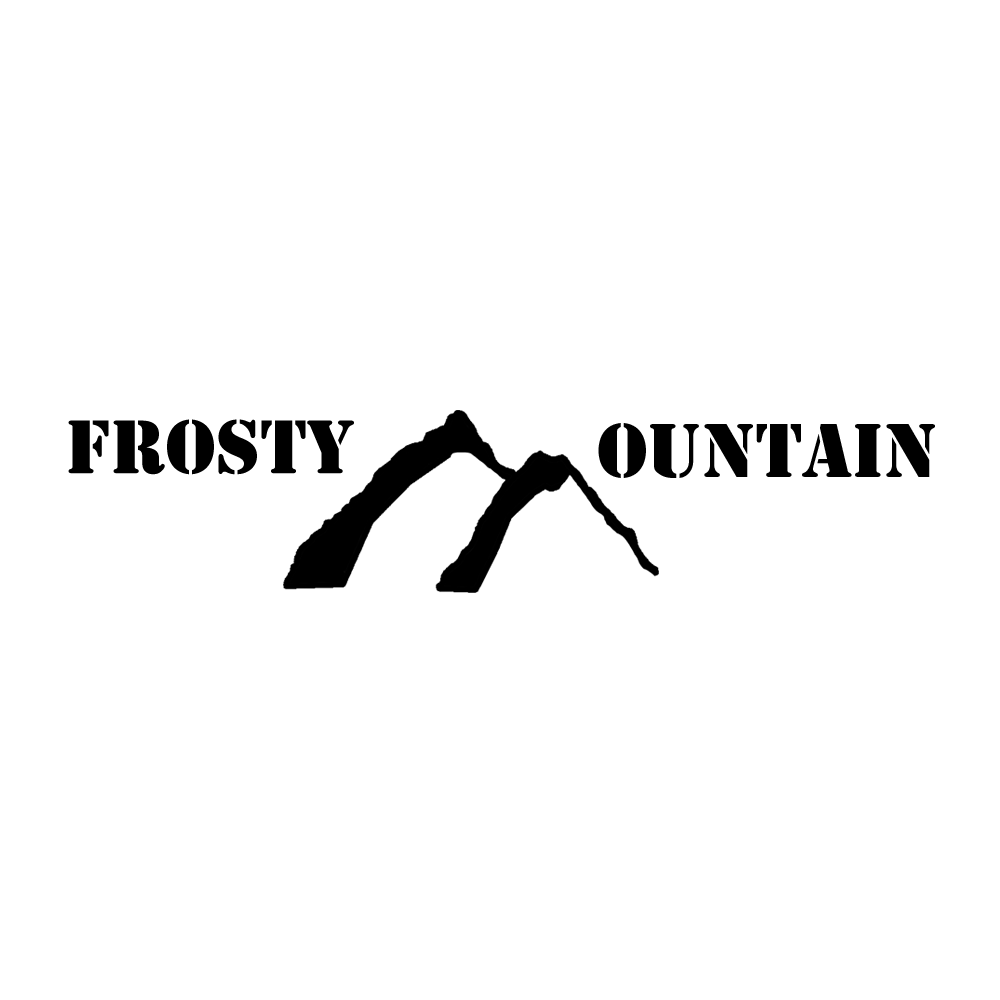
<style>
.page{position:relative;width:1000px;height:1000px;background:#ffffff}
.page>*{position:absolute;margin:0}
.t1{font:70.5px "StencilStd";color:#000000}
.t2{font:71.2px "StencilStd";color:#000000}
</style>
<div class="page">
<p class="t1" style="left:68px;top:419px;width:286px;height:56px">Frosty</p>
<p class="t2" style="left:598px;top:423px;width:337px;height:55px">ountain</p>
</div>
